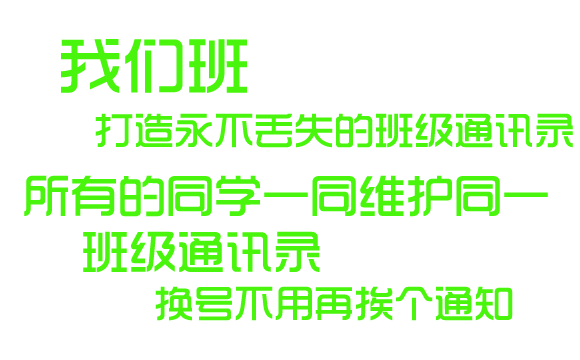
<style>
.page{position:relative;width:580px;height:360px;background:#ffffff}
.page>*{position:absolute;margin:0}
.t1{font:64px "TRENDS";color:#49f50c}
.t2{font:40px "TRENDS";color:#49f50c}
.t3{font:48px "TRENDS";color:#49f50c}
</style>
<div class="page">
<p class="t1" style="left:61px;top:39px;width:186px;height:54px">我们班</p>
<p class="t2" style="left:95px;top:113px;width:478px;height:35px">打造永不丢失的班级通讯录</p>
<p class="t3" style="left:24px;top:175px;width:524px;height:42px">所有的同学一同维护同一</p>
<p class="t3" style="left:83px;top:231px;width:237px;height:42px">班级通讯录</p>
<p class="t2" style="left:155px;top:286px;width:358px;height:35px">换号不用再挨个通知</p>
</div>
